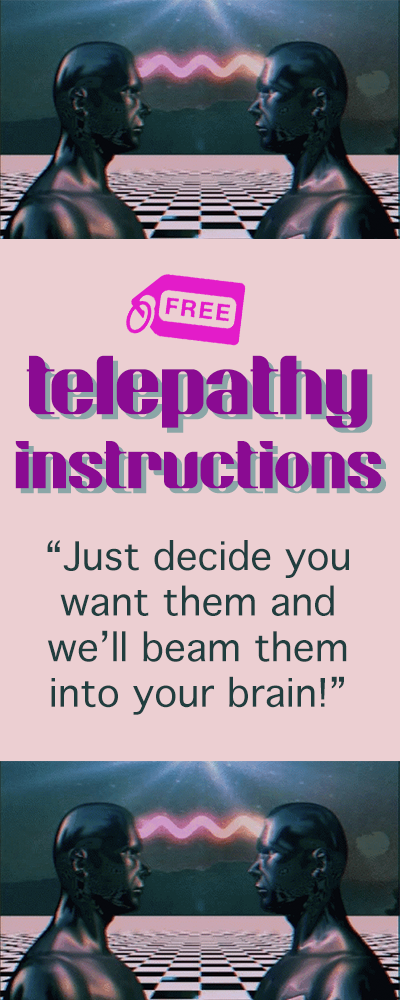
<style>
.page{position:relative;width:400px;height:1000px;background:#eccfd2}
.page>*{position:absolute;margin:0}
.t1{font:76px/74px "ThinkBold";color:#8a0b92}
.t2{font:94px/74px "ThinkBold";color:#8a0b92}
.t3{font:76px/74px "ThinkBold"}
.t4{font:94px/74px "ThinkBold"}
.t5{font:38px "Thonburi";color:#213e3f}
</style>
<div class="page">
<p class="t1" style="left:15px;top:355px;width:366px;height:134px;text-align:center"><span class="t2">telepathy<br></span>instructions</p>
<p class="t3" style="left:20px;top:360px;width:366px;height:134px;text-align:center"><span class="t4">telepathy<br></span>instructions</p>
<p class="t5" style="left:47px;top:540px;width:302px;height:175px;text-align:center">“Just decide you want them and we’ll beam them into your brain!”</p>
</div>
